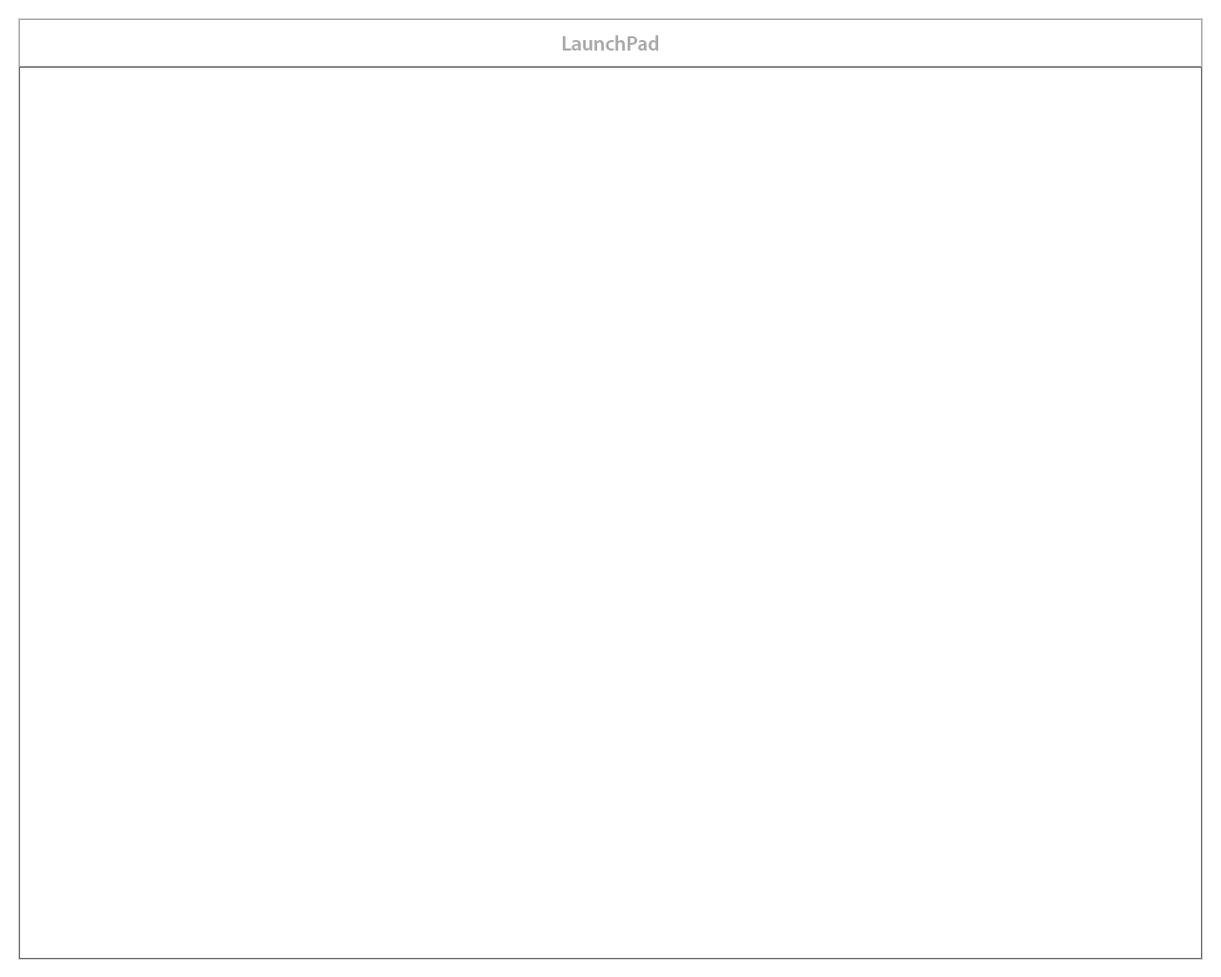
<style>
.page{position:relative;width:1221px;height:977px;background:#ffffff}
.page>*{position:absolute;margin:0}
.t1{font:21px "MyriadPro-Semibold";letter-spacing:-0.01em;color:#aaaaaa}
</style>
<div class="page">
<p class="t1" style="left:563px;top:35px;width:95px;height:16px">LaunchPad</p>
</div>
